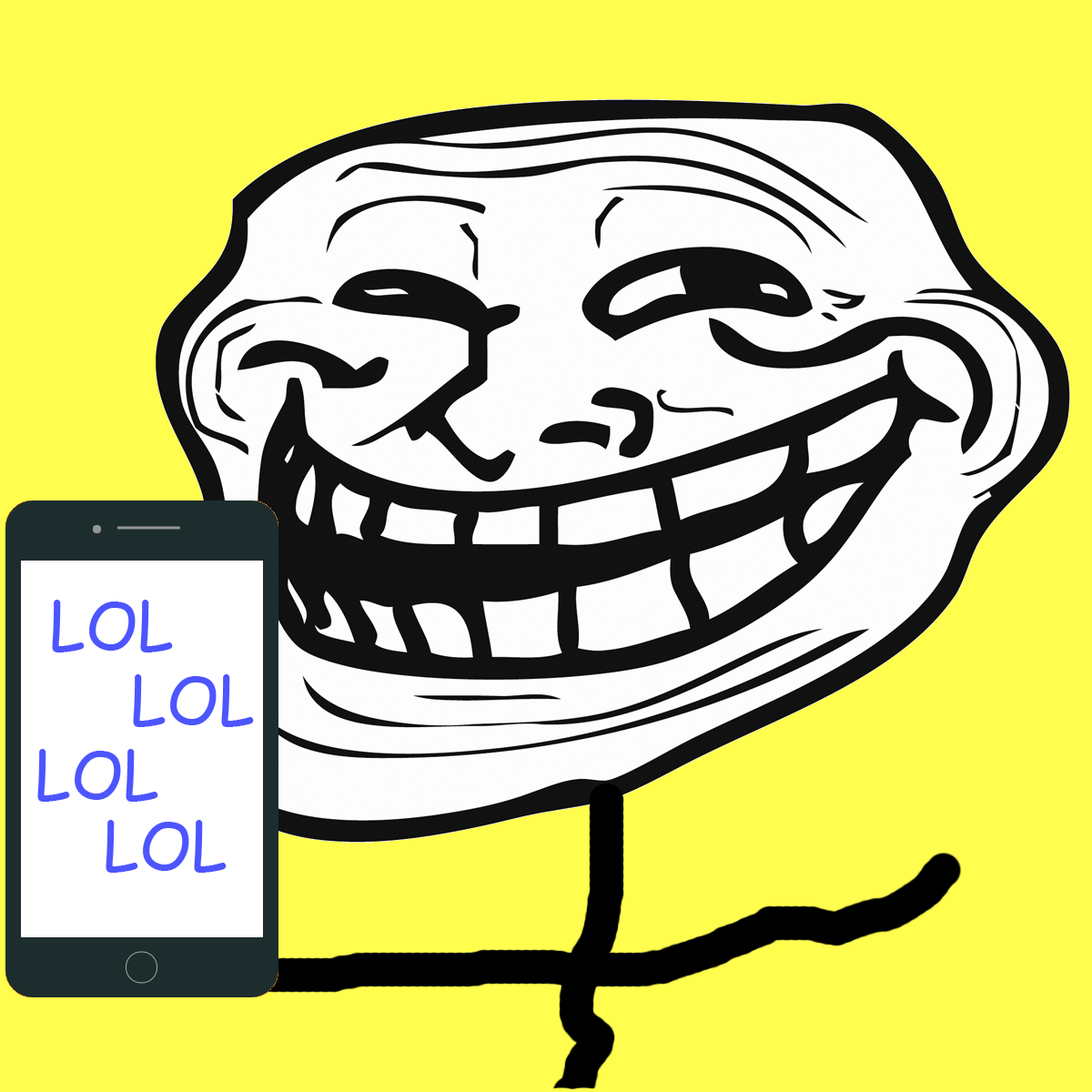
<style>
.page{position:relative;width:1092px;height:1092px;background:#fffd4e}
.page>*{position:absolute;margin:0}
.t1{font:65.5px "ComicSansMS";color:#4d55ff}
</style>
<div class="page">
<p class="t1" style="left:52px;top:600px;width:121px;height:52px">LOL</p>
<p class="t1" style="left:133px;top:674px;width:121px;height:53px">LOL</p>
<p class="t1" style="left:37px;top:749px;width:121px;height:53px">LOL</p>
<p class="t1" style="left:106px;top:820px;width:121px;height:53px">LOL</p>
</div>
